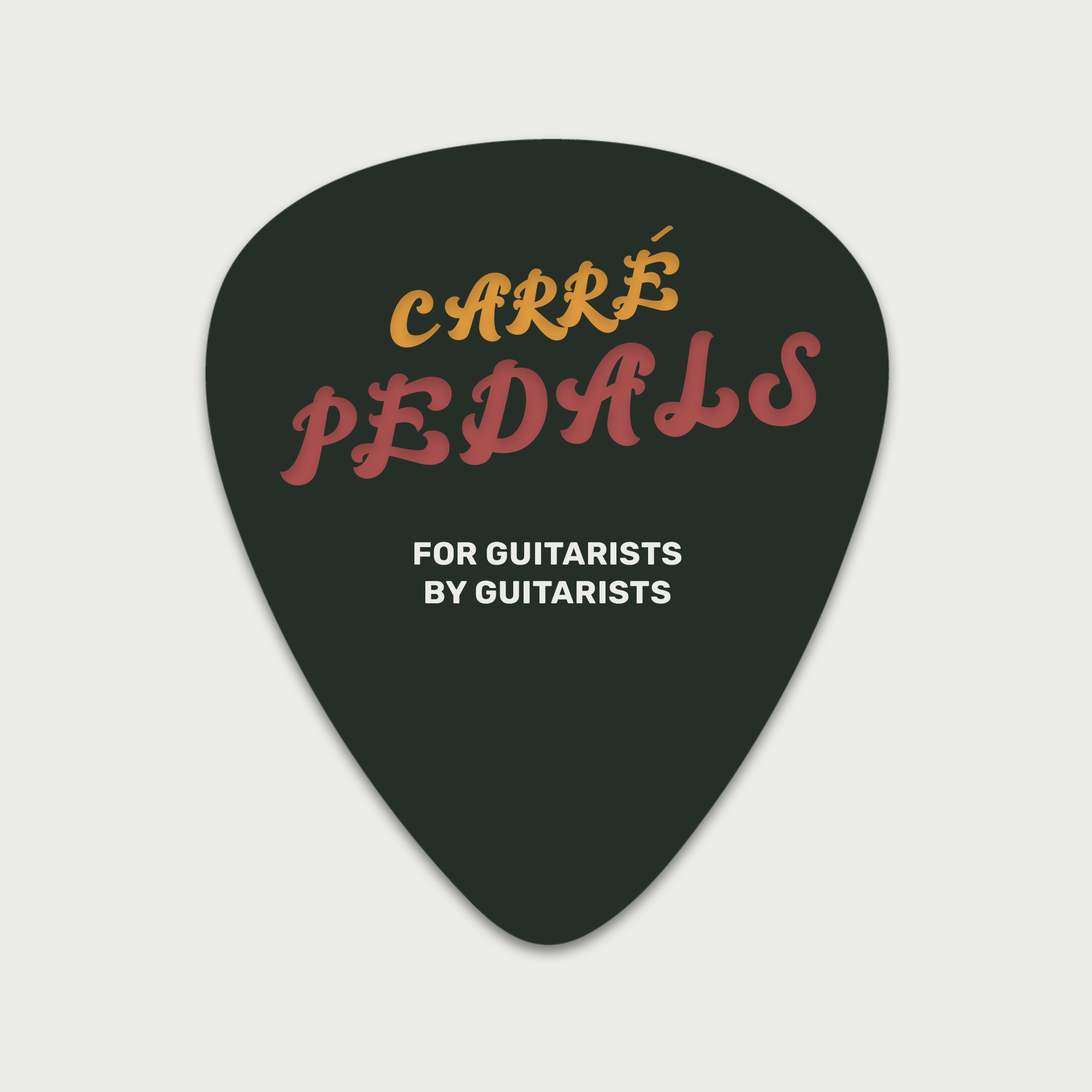
<style>
.page{position:relative;width:1092px;height:1092px;background:#ebecea}
.page>*{position:absolute;margin:0}
.t1{font:45.5px "TheBrandy";letter-spacing:0.02em;color:#bc8234;text-transform:uppercase}
.t2{font:68.8px "TheBrandy";letter-spacing:0.02em;color:#d1903a;text-transform:uppercase}
.t3{font:103.2px "TheBrandy";letter-spacing:0.02em;color:#a34d4c;text-transform:uppercase}
.t4{font:68.8px "TheBrandy";letter-spacing:0.02em;color:#a34d4c;text-transform:uppercase}
.t5{font:31.8px/38.9px "Rubik-Bold";letter-spacing:0.02em;color:#ebecea;text-transform:uppercase}
</style>
<div class="page">
<p class="t1" style="left:651px;top:225px;width:22px;height:17px;rotate:-35deg">-</p>
<p class="t2" style="left:390px;top:250px;width:290px;height:98px;rotate:-8deg">CarrE</p>
<p class="t3" style="left:280px;top:330px;width:541px;height:155px;rotate:-8deg"><span class="t4"><br><br></span>pedals</p>
<p class="t5" style="left:414px;top:542px;width:267px;height:62px;text-align:center">for guitarists<br>by guitarists</p>
</div>
